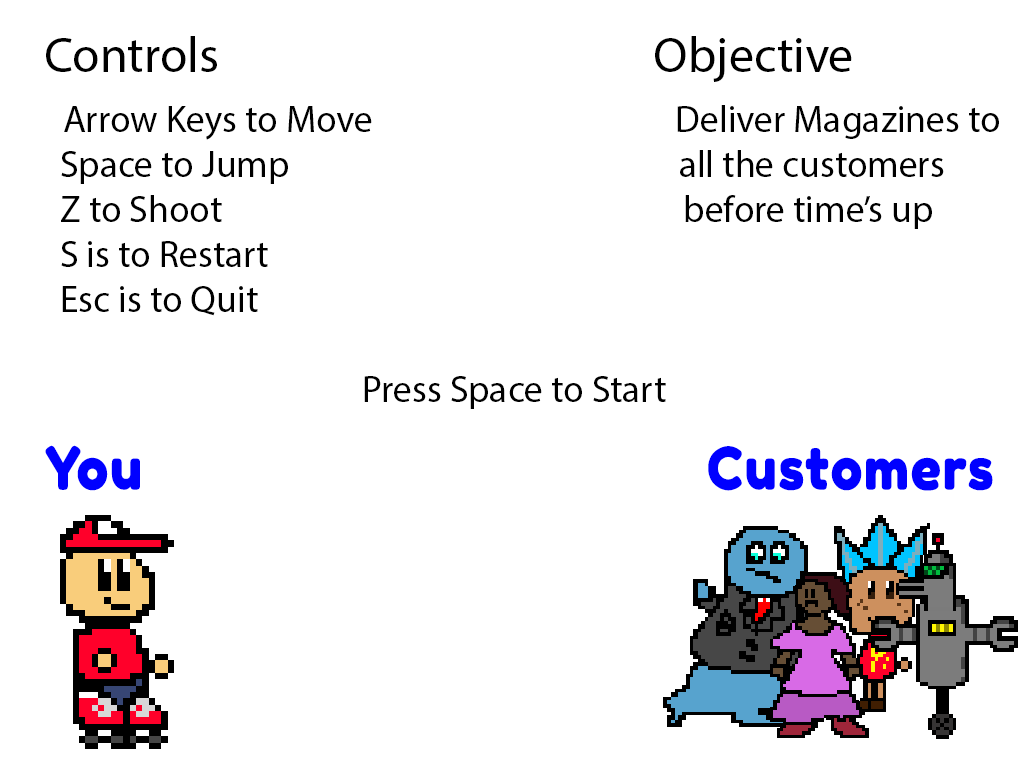
<style>
.page{position:relative;width:1024px;height:768px;background:#ffffff}
.page>*{position:absolute;margin:0}
.t1{font:37.5px "MyriadPro-Regular";color:#000000}
.t2{font:12px "MyriadPro-Regular";color:#000000}
.t3{font:58.3px "FredokaOne-Regular";letter-spacing:0.01em;color:#0000ff;font-weight:bold;scale:0.9 1}
</style>
<div class="page">
<p class="t1" style="left:46px;top:36px;width:953px;height:373px"><span class="t2">Controls                                         Objective<br> </span> Arrow Keys to Move                                      Deliver Magazines to <br>  Space to Jump                                                 all the customers <br>  Z to Shoot                                                          before time’s up<br>  S is to Restart <br>  Esc is to Quit<br><br>                                        Press Space to Start</p>
<p class="t3" style="left:45px;top:445px;width:948px;height:46px">You                                     Customers</p>
</div>
